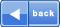
<style>
.page{position:relative;width:60px;height:27px}
.page>*{position:absolute;margin:0}
.t1{font:8.3px "Arial-BoldMT";letter-spacing:0.1em;color:#ffffff}
</style>
<div class="page">
<p class="t1" style="left:33px;top:10px;width:21px;height:7px">back</p>
</div>
